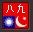
<style>
.page{position:relative;width:33px;height:32px;background:#f20000}
.page>*{position:absolute;margin:0}
.t1{font:10.4px "SimSun";color:#ffffff}
</style>
<div class="page">
<p class="t1" style="left:6px;top:4px;width:19px;height:9px">八九</p>
</div>
